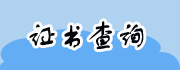
<style>
.page{position:relative;width:180px;height:70px;background:#b0d2f1}
.page>*{position:absolute;margin:0}
.t1{font:30px "FZSTK--GBK1-0";color:#000407}
</style>
<div class="page">
<p class="t1" style="left:29px;top:21px;width:115px;height:28px">证书查询</p>
</div>
